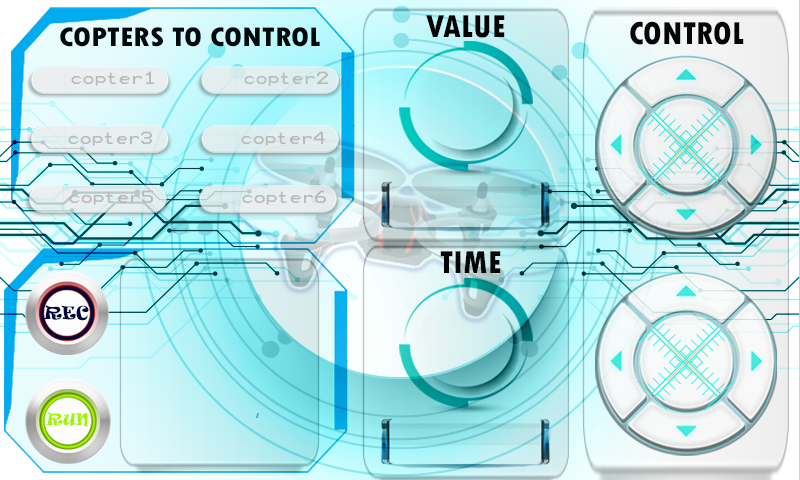
<style>
.page{position:relative;width:800px;height:480px}
.page>*{position:absolute;margin:0}
.t1{font:33.3px "TwCenMT-CondensedExtraBold";color:#050505}
.t2{font:28.3px "TwCenMT-CondensedExtraBold";color:#0c0c0c;scale:1.14 1}
.t3{font:14.2px "Terminal";color:#bababa;scale:1.14 1}
</style>
<div class="page">
<p class="t1" style="left:426px;top:15px;width:79px;height:23px">VALUE</p>
<p class="t2" style="left:60px;top:27px;width:260px;height:20px">COPTERS TO CONTROL</p>
<p class="t1" style="left:630px;top:21px;width:114px;height:24px">CONTROL</p>
<p class="t3" style="left:71px;top:71px;width:83px;height:15px">copter1</p>
<p class="t3" style="left:244px;top:71px;width:84px;height:15px">copter2</p>
<p class="t3" style="left:68px;top:131px;width:84px;height:15px">copter3</p>
<p class="t3" style="left:241px;top:131px;width:84px;height:15px">copter4</p>
<p class="t3" style="left:69px;top:190px;width:84px;height:15px">copter5</p>
<p class="t3" style="left:242px;top:190px;width:84px;height:15px">copter6</p>
<p class="t1" style="left:440px;top:251px;width:61px;height:22px">TIME</p>
</div>
